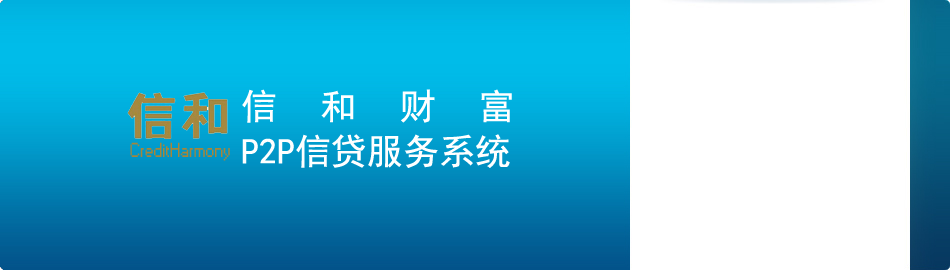
<style>
.page{position:relative;width:950px;height:270px;background:#ffffff}
.page>*{position:absolute;margin:0}
.t1{font:36px/45px "SimHei";color:#ffffff}
.t2{font:36px/45px "SimHei";letter-spacing:1.2em;color:#ffffff}
.t3{font:19px "Small Fonts";color:#a78639}
</style>
<div class="page">
<p class="t1" style="left:242px;top:89px;width:270px;height:79px"><span class="t2">信和财富<br></span>P2P信贷服务系统</p>
<p class="t3" style="left:130px;top:142px;width:100px;height:19px">CreditHarmony</p>
</div>
